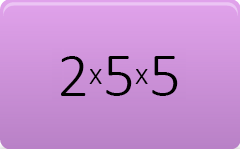
<style>
.page{position:relative;width:240px;height:149px}
.page>*{position:absolute;margin:0}
.t1{font:64px "Calibri-Light";color:#000000}
.t2{font:32px "Calibri-Light";color:#000000}
</style>
<div class="page">
<p class="t1" style="left:61px;top:56px;width:117px;height:40px">2<span class="t2">x</span>5<span class="t2">x</span>5</p>
</div>
